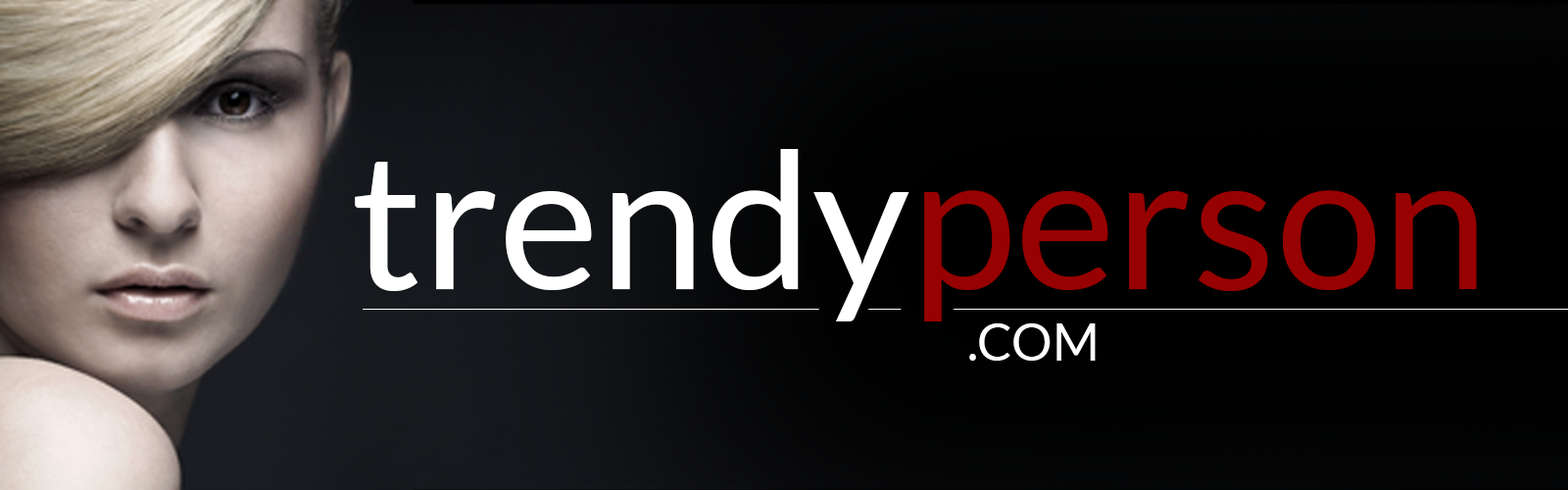
<style>
.page{position:relative;width:1568px;height:490px}
.page>*{position:absolute;margin:0}
.t1{font:191.1px "Lato-Regular";color:#ffffff}
.t2{font:191.1px "Lato-Regular";color:#980101}
.t3{font:51px "Lato-Regular";color:#ffffff}
</style>
<div class="page">
<p class="t1" style="left:355px;top:149px;width:1122px;height:172px">trendy<span class="t2">person</span></p>
<p class="t3" style="left:969px;top:323px;width:127px;height:38px">.COM</p>
</div>
